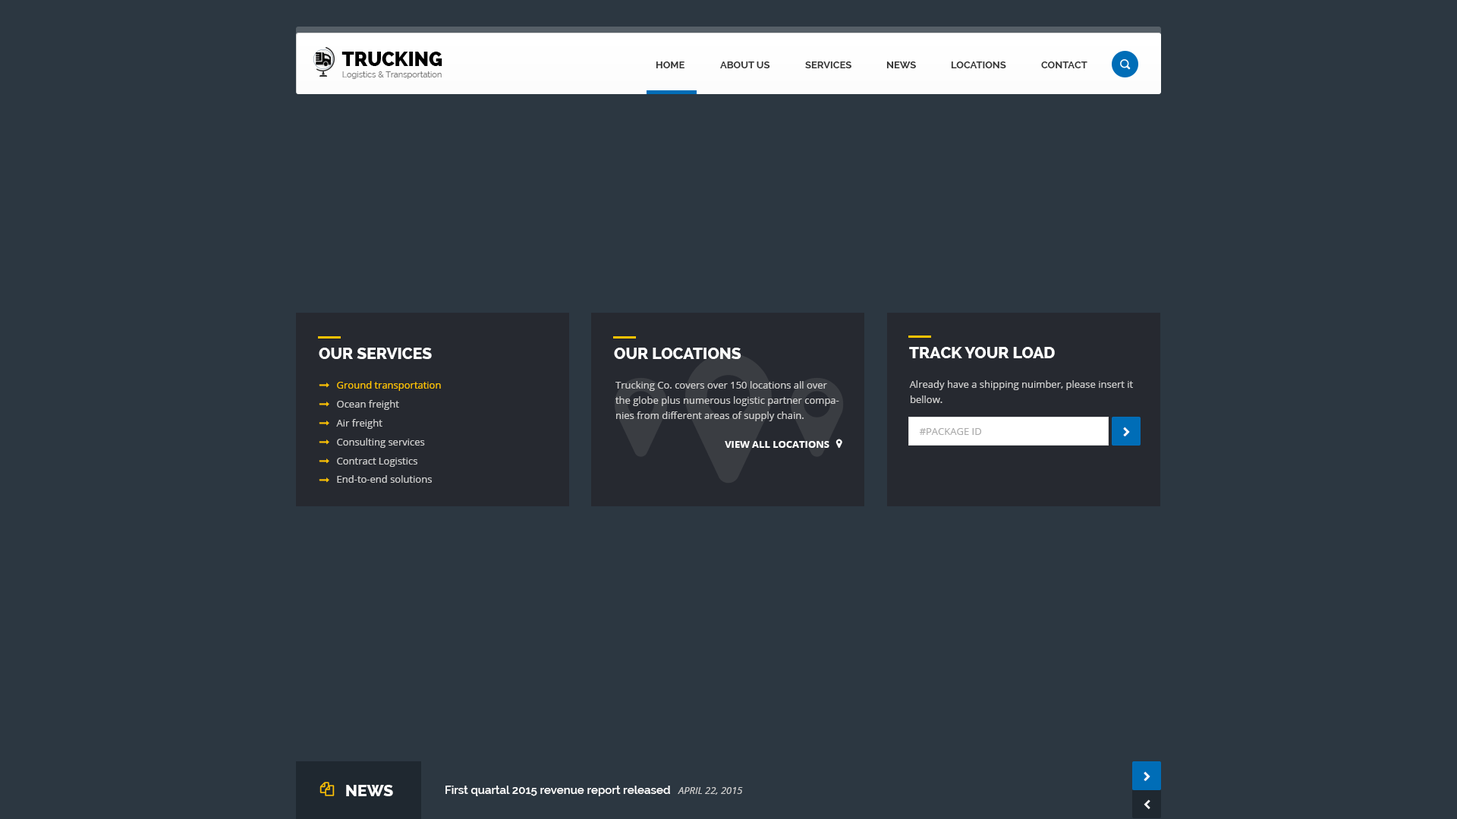
<style>
.page{position:relative;width:1457px;height:819px;background:#2c3741}
.page>*{position:absolute;margin:0}
.t1{font:19.7px "Raleway-Heavy";color:#010101;text-transform:uppercase}
.t2{font:9.9px "Raleway-Bold";color:#333333;text-transform:uppercase}
.t3{font:8.4px "Raleway";color:#777777}
.t4{font:15.9px "Raleway-ExtraBold";color:#ffffff;text-transform:uppercase}
.t5{font:9.9px "OpenSans";color:#fdc300}
.t6{font:9.9px/15.2px "OpenSans";color:#cccccc}
.t7{font:9.9px "OpenSans";color:#cccccc}
.t8{font:9.9px "OpenSans";color:#aaaaaa}
.t9{font:9.9px "OpenSans-Bold";color:#ffffff;text-transform:uppercase}
.t10{font:11.4px "Raleway-SemiBold";color:#ffffff}
.t11{font:9.9px "OpenSans-Italic";color:#cccccc}
</style>
<div class="page">
<p class="t1" style="left:341px;top:52px;width:101px;height:14px">TRUCKING</p>
<p class="t2" style="left:655px;top:61px;width:29px;height:7px">HOME</p>
<p class="t2" style="left:720px;top:61px;width:50px;height:7px">ABOUT US</p>
<p class="t2" style="left:805px;top:61px;width:46px;height:7px">SERVICES</p>
<p class="t2" style="left:886px;top:61px;width:30px;height:7px">NEWS</p>
<p class="t2" style="left:951px;top:61px;width:55px;height:7px">LOCATIONS</p>
<p class="t2" style="left:1041px;top:61px;width:46px;height:7px">CONTACT</p>
<p class="t3" style="left:342px;top:71px;width:100px;height:8px">Logistics &amp; Transportation</p>
<p class="t4" style="left:319px;top:347px;width:113px;height:12px">OUR SERVICES</p>
<p class="t4" style="left:614px;top:347px;width:127px;height:12px">OUR LOCATIONS</p>
<p class="t4" style="left:909px;top:347px;width:146px;height:11px">track your load</p>
<p class="t5" style="left:337px;top:381px;width:104px;height:10px">Ground transportation</p>
<p class="t6" style="left:615px;top:381px;width:224px;height:40px">Trucking Co. covers over 150 locations all over the globe plus numerous logistic partner companies from different areas of supply chain.</p>
<p class="t6" style="left:909px;top:380px;width:224px;height:23px">Already have a shipping nuimber, please insert it bellow.</p>
<p class="t7" style="left:337px;top:400px;width:62px;height:10px">Ocean freight</p>
<p class="t7" style="left:336px;top:419px;width:46px;height:10px">Air freight</p>
<p class="t7" style="left:337px;top:438px;width:88px;height:10px">Consulting services</p>
<p class="t8" style="left:919px;top:428px;width:62px;height:7px">#PACKAGE ID</p>
<p class="t9" style="left:725px;top:441px;width:104px;height:7px">VIEW ALL LOCATIONS</p>
<p class="t7" style="left:337px;top:457px;width:80px;height:10px">Contract Logistics</p>
<p class="t7" style="left:337px;top:475px;width:95px;height:8px">End-to-end solutions</p>
<p class="t4" style="left:346px;top:784px;width:47px;height:12px">NEWS</p>
<p class="t10" style="left:445px;top:785px;width:225px;height:11px">First quartal 2015 revenue report released</p>
<p class="t11" style="left:677px;top:787px;width:66px;height:7px">APRIL 22, 2015</p>
</div>
